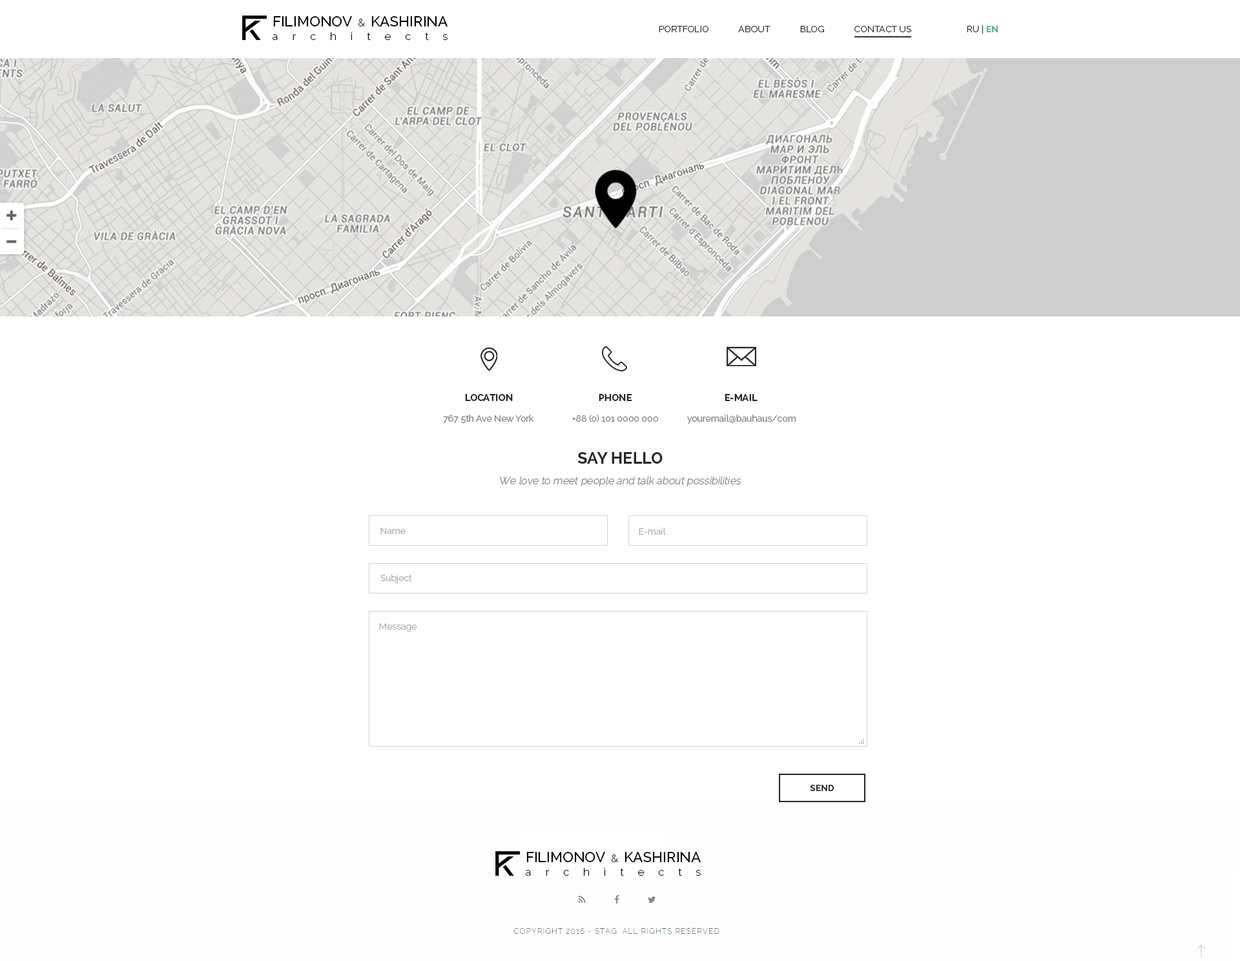
<style>
.page{position:relative;width:1240px;height:961px;background:#ffffff}
.page>*{position:absolute;margin:0}
.t1{font:10.5px/0.2px "Raleway-Light";color:#000000}
.t2{font:14.5px/0.2px "Raleway-Medium";color:#000000;text-transform:uppercase}
.t3{font:9px "Raleway-Regular";color:#313131;text-transform:uppercase}
.t4{font:9px "Raleway-Bold";color:#3bb48b;text-transform:uppercase}
.t5{font:9.7px "Raleway-Bold";color:#262626;text-transform:uppercase}
.t6{font:9px "Raleway-Regular";color:#787878}
.t7{font:16.2px "Raleway-Bold";color:#262626;text-transform:uppercase}
.t8{font:10.3px "Raleway-Light";color:#787878;font-style:italic}
.t9{font:9px "Raleway-Regular";color:#acacac}
.t10{font:9px "Raleway-Bold";color:#242424;text-transform:uppercase}
</style>
<div class="page">
<p class="t1" style="left:273px;top:16px;width:175px;height:24px;text-align:justify"><span class="t2">FILIMONOV </span>&amp; <span class="t2">KASHIRINA <br></span>architects</p>
<p class="t3" style="left:659px;top:26px;width:253px;height:6px">portfolio             about             blog             contact us</p>
<p class="t3" style="left:967px;top:25px;width:31px;height:9px">Ru | <span class="t4">En</span></p>
<p class="t5" style="left:465px;top:394px;width:48px;height:7px">location</p>
<p class="t5" style="left:599px;top:394px;width:33px;height:7px">phone</p>
<p class="t5" style="left:725px;top:394px;width:33px;height:7px">e-mail</p>
<p class="t6" style="left:443px;top:415px;width:91px;height:9px">767 5th Ave New York</p>
<p class="t6" style="left:572px;top:415px;width:86px;height:8px">+88 (0) 101 0000 000</p>
<p class="t6" style="left:687px;top:415px;width:109px;height:9px">youremail@bauhaus/com</p>
<p class="t7" style="left:578px;top:452px;width:85px;height:12px">say hello</p>
<p class="t8" style="left:500px;top:477px;width:242px;height:9px">We love to meet people and talk about possibilities</p>
<p class="t9" style="left:381px;top:528px;width:25px;height:6px">Name</p>
<p class="t9" style="left:639px;top:528px;width:27px;height:7px">E-mail</p>
<p class="t9" style="left:381px;top:574px;width:31px;height:9px">Subject</p>
<p class="t9" style="left:379px;top:623px;width:38px;height:9px">Message</p>
<p class="t10" style="left:810px;top:785px;width:25px;height:6px">send</p>
<p class="t1" style="left:526px;top:852px;width:175px;height:24px;text-align:justify"><span class="t2">FILIMONOV </span>&amp; <span class="t2">KASHIRINA <br></span>architects</p>
</div>
